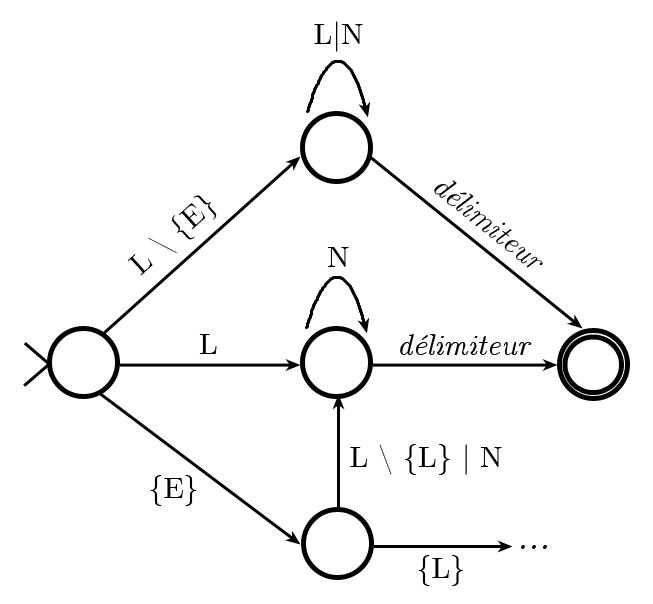
<style>
.page{position:relative;width:653px;height:604px;background:#ffffff}
.page>*{position:absolute;margin:0}
.t1{font:30px "CMUSerif-Roman";color:#000000}
.t2{font:30px "CMUSerif-Italic";color:#000000}
.t3{font:36px "CMUSerif-Italic";color:#000000}
</style>
<div class="page">
<p class="t1" style="left:314px;top:21px;width:49px;height:31px">L|N</p>
<p class="t2" style="left:434px;top:180px;width:109px;height:88px;rotate:39deg">délimiteur</p>
<p class="t1" style="left:127px;top:195px;width:90px;height:81px;rotate:-42deg">L \ {E}</p>
<p class="t1" style="left:327px;top:247px;width:22px;height:20px">N</p>
<p class="t1" style="left:199px;top:334px;width:18px;height:20px">L</p>
<p class="t2" style="left:400px;top:334px;width:132px;height:21px">délimiteur</p>
<p class="t1" style="left:350px;top:444px;width:152px;height:31px">L \ {L} | N</p>
<p class="t1" style="left:150px;top:475px;width:47px;height:31px">{E}</p>
<p class="t3" style="left:521px;top:545px;width:26px;height:4px">...</p>
<p class="t1" style="left:418px;top:555px;width:45px;height:31px">{L}</p>
</div>
